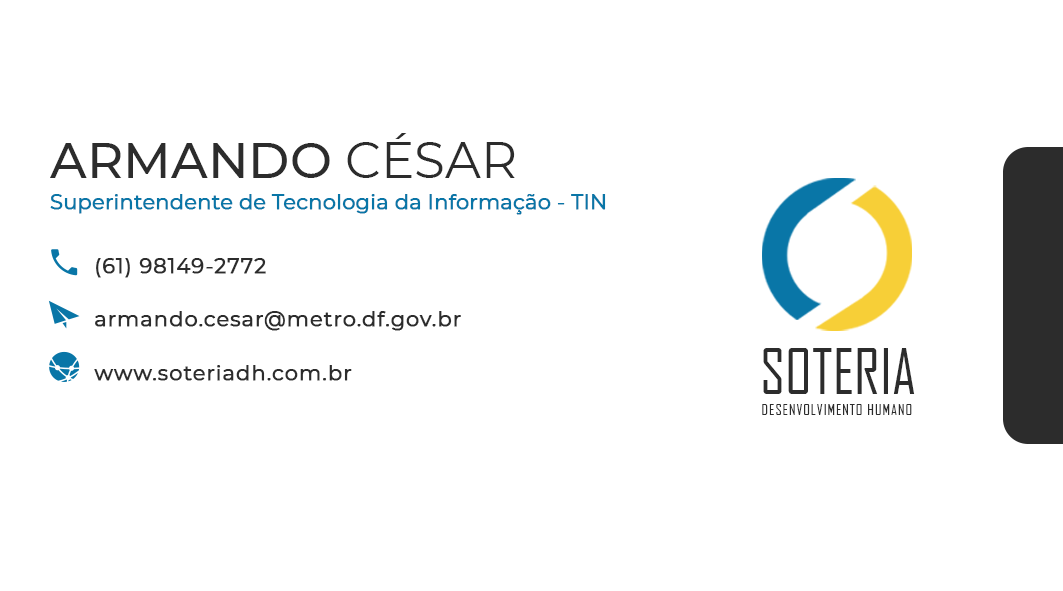
<style>
.page{position:relative;width:1063px;height:591px;background:#ffffff}
.page>*{position:absolute;margin:0}
.t1{font:50px "Montserrat-Medium";color:#2c2c2c;text-transform:uppercase}
.t2{font:50px "Montserrat-Regular";color:#2c2c2c;text-transform:uppercase}
.t3{font:20.8px "Montserrat-Regular";letter-spacing:-0.01em;color:#0976a7;font-weight:bold}
.t4{font:20.8px "Montserrat-Regular";letter-spacing:0.03em;color:#2c2c2c;font-weight:bold}
.t5{font:60.1px "AgencyFB-Reg";color:#2c2c2c;text-transform:uppercase}
.t6{font:15.4px "AgencyFB-Reg";letter-spacing:0.05em;color:#2c2c2c;text-transform:uppercase}
</style>
<div class="page">
<p class="t1" style="left:50px;top:133px;width:465px;height:45px">Armando <span class="t2">César</span></p>
<p class="t3" style="left:50px;top:194px;width:556px;height:21px">Superintendente de Tecnologia da Informação - TIN</p>
<p class="t4" style="left:96px;top:258px;width:170px;height:20px">(61) 98149-2772</p>
<p class="t4" style="left:95px;top:311px;width:366px;height:20px">armando.cesar@metro.df.gov.br</p>
<p class="t5" style="left:763px;top:348px;width:152px;height:46px">Soteria</p>
<p class="t4" style="left:94px;top:365px;width:258px;height:16px">www.soteriadh.com.br</p>
<p class="t6" style="left:762px;top:404px;width:150px;height:11px">Desenvolvimento Humano</p>
</div>
